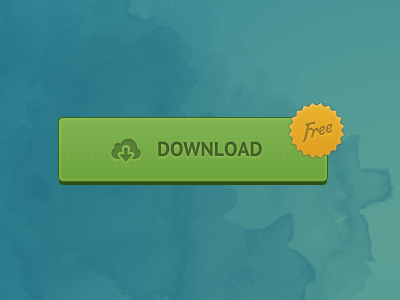
<style>
.page{position:relative;width:400px;height:300px}
.page>*{position:absolute;margin:0}
.t1{font:20px "Lombriz";color:#9c752e}
.t2{font:20px "PTSans-Bold";color:#405d27}
</style>
<div class="page">
<p class="t1" style="left:302px;top:121px;width:31px;height:22px;rotate:-15deg">Free</p>
<p class="t2" style="left:158px;top:141px;width:104px;height:16px">DOWNLOAD</p>
</div>
